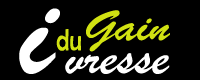
<style>
.page{position:relative;width:200px;height:80px;background:#000000}
.page>*{position:absolute;margin:0}
.t1{font:50.3px "BrushScriptMT";color:#ffffff;scale:1.13 1}
.t2{font:135px "BrushScriptMT";color:#ffffff;scale:1.13 1}
.t3{font:45px "BrushScriptMT";color:#d1e212;scale:1.21 1}
.t4{font:30.7px "BerlinSansFB-Reg";color:#d1e212;scale:0.75 1}
</style>
<div class="page">
<p class="t1" style="left:19px;top:8px;width:151px;height:66px"><span class="t2">i </span>vresse</p>
<p class="t3" style="left:86px;top:10px;width:84px;height:42px">Gain</p>
<p class="t4" style="left:56px;top:29px;width:25px;height:22px">du</p>
</div>
